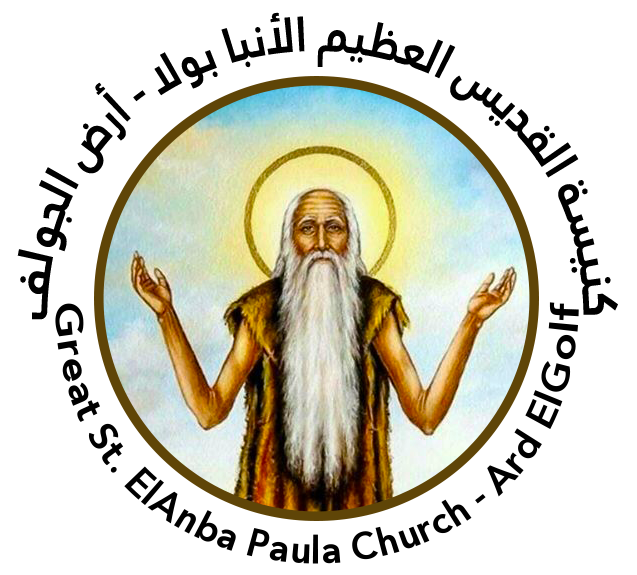
<style>
.page{position:relative;width:637px;height:575px;background:#ffffff}
.page>*{position:absolute;margin:0}
.t1{font:48px "AJannatLT-Bold";color:#000000;scale:0.53 1}
.t2{font:38.7px "AJannatLT-Bold";color:#000000;scale:0.6 1}
</style>
<div class="page">
<p class="t1" style="left:17px;top:12px;width:601px;height:308px">كنيسة القديس العظيم الأنبا بولا - أرض الجولف</p>
<p class="t2" style="left:55px;top:302px;width:524px;height:262px">Great St. ElAnba Paula Church - Ard ElGolf</p>
</div>
